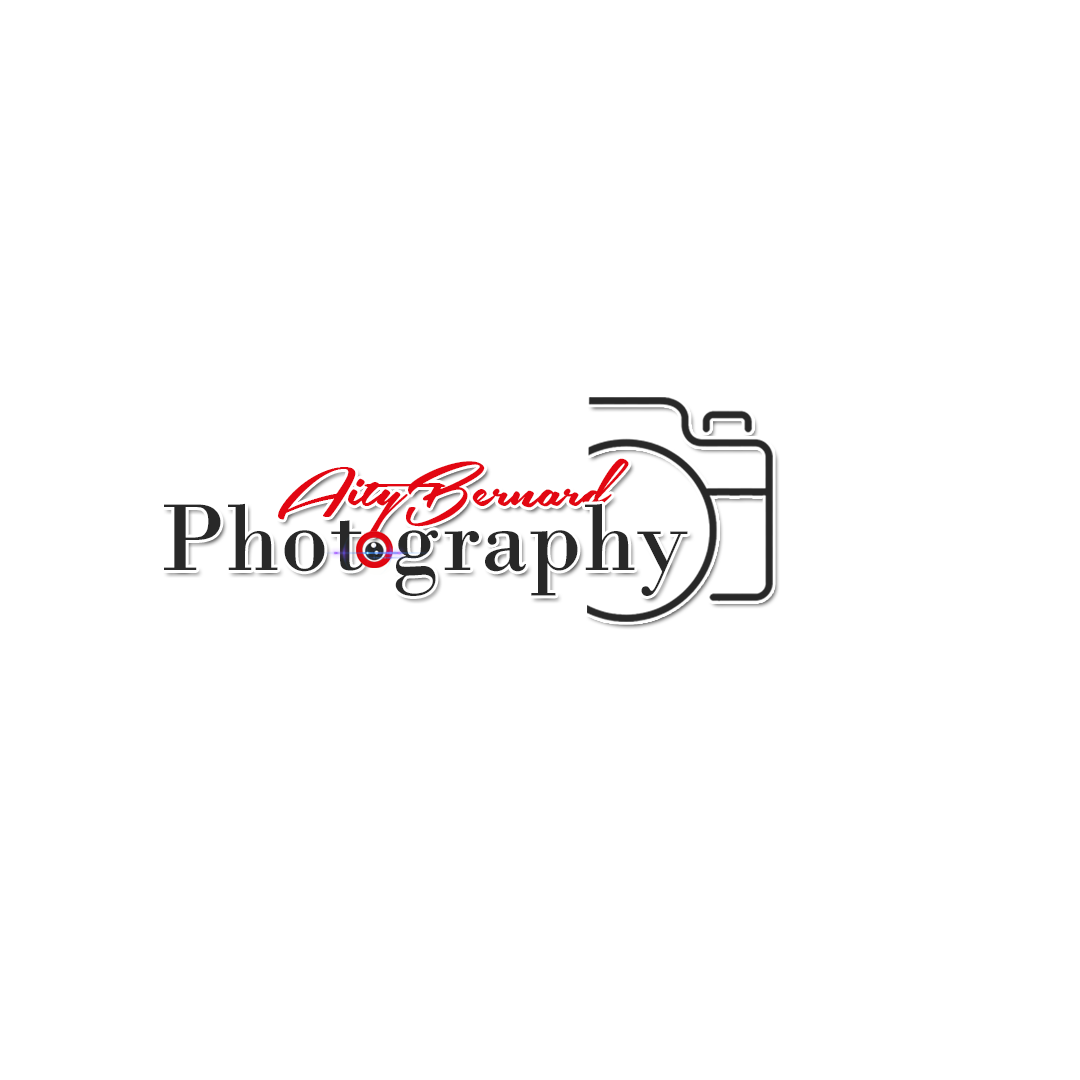
<style>
.page{position:relative;width:1080px;height:1080px;background:#ffffff}
.page>*{position:absolute;margin:0}
.t1{font:84.5px "SouthernAirePersonalUseOnly";color:#e20712}
.t2{font:100px "BodoniMT";color:#282828}
</style>
<div class="page">
<p class="t1" style="left:278px;top:458px;width:351px;height:79px">AityBernard</p>
<p class="t2" style="left:164px;top:503px;width:524px;height:93px">Phot graphy</p>
</div>
